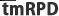
<style>
.page{position:relative;width:59px;height:16px;background:#ffffff}
.page>*{position:absolute;margin:0}
.t1{font:17px "AdobeGothicStd-Bold";color:#303030;font-weight:bold}
</style>
<div class="page">
<p class="t1" style="left:2px;top:2px;width:56px;height:14px">tmRPD</p>
</div>
